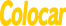
<style>
.page{position:relative;width:66px;height:26px;background:#ffffff}
.page>*{position:absolute;margin:0}
.t1{font:31px "RodinPro-EB";letter-spacing:-0.057em;color:#fecd00;font-style:italic;scale:0.59 1}
</style>
<div class="page">
<p class="t1" style="left:0px;top:0px;width:67px;height:26px">Colocar</p>
</div>
